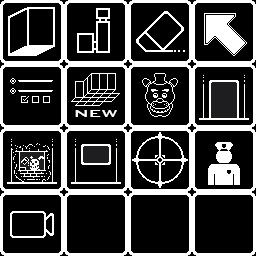
<style>
.page{position:relative;width:256px;height:256px;background:#000000}
.page>*{position:absolute;margin:0}
.t1{font:15.5px "BankGothicBT-Medium";color:#ffffff;scale:1.33 1}
</style>
<div class="page">
<p class="t1" style="left:75px;top:110px;width:42px;height:7px">new</p>
</div>
